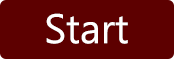
<style>
.page{position:relative;width:174px;height:59px;background:#5d0000}
.page>*{position:absolute;margin:0}
.t1{font:38px "MicrosoftJhengHeiUIRegular";color:#ffffff}
</style>
<div class="page">
<p class="t1" style="left:46px;top:13px;width:82px;height:31px">Start</p>
</div>
